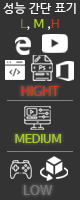
<style>
.page{position:relative;width:80px;height:200px;background:#333333}
.page>*{position:absolute;margin:0}
.t1{font:12.1px/15.2px "HanSantteutDotumRegular";color:#ffffff}
.t2{font:12.1px/15.2px "HanSantteutDotumRegular";color:#757561}
.t3{font:12.1px/15.2px "HanSantteutDotumRegular";color:#aed70d}
.t4{font:12.1px/15.2px "HanSantteutDotumRegular";color:#d3340a}
.t5{font:12.8px "HanSantteutDotumBold";color:#d3340a}
.t6{font:11.7px "HanSantteutDotumBold";color:#a8cf10}
.t7{font:13.2px "HanSantteutDotumBold";color:#777777}
</style>
<div class="page">
<p class="t1" style="left:3px;top:2px;width:73px;height:28px;text-align:center">성능 간단 표기<br><span class="t2">L</span>, <span class="t3">M</span> ,<span class="t4">H</span></p>
<p class="t5" style="left:21px;top:86px;width:39px;height:10px">HIGHT</p>
<p class="t6" style="left:15px;top:134px;width:46px;height:9px">MEDIUM</p>
<p class="t7" style="left:23px;top:185px;width:30px;height:10px">LOW</p>
</div>
